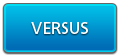
<style>
.page{position:relative;width:120px;height:56px}
.page>*{position:absolute;margin:0}
.t1{font:16px "FrutigerLTStd-Roman";color:#ffffff}
</style>
<div class="page">
<p class="t1" style="left:31px;top:22px;width:57px;height:12px">VERSUS</p>
</div>
